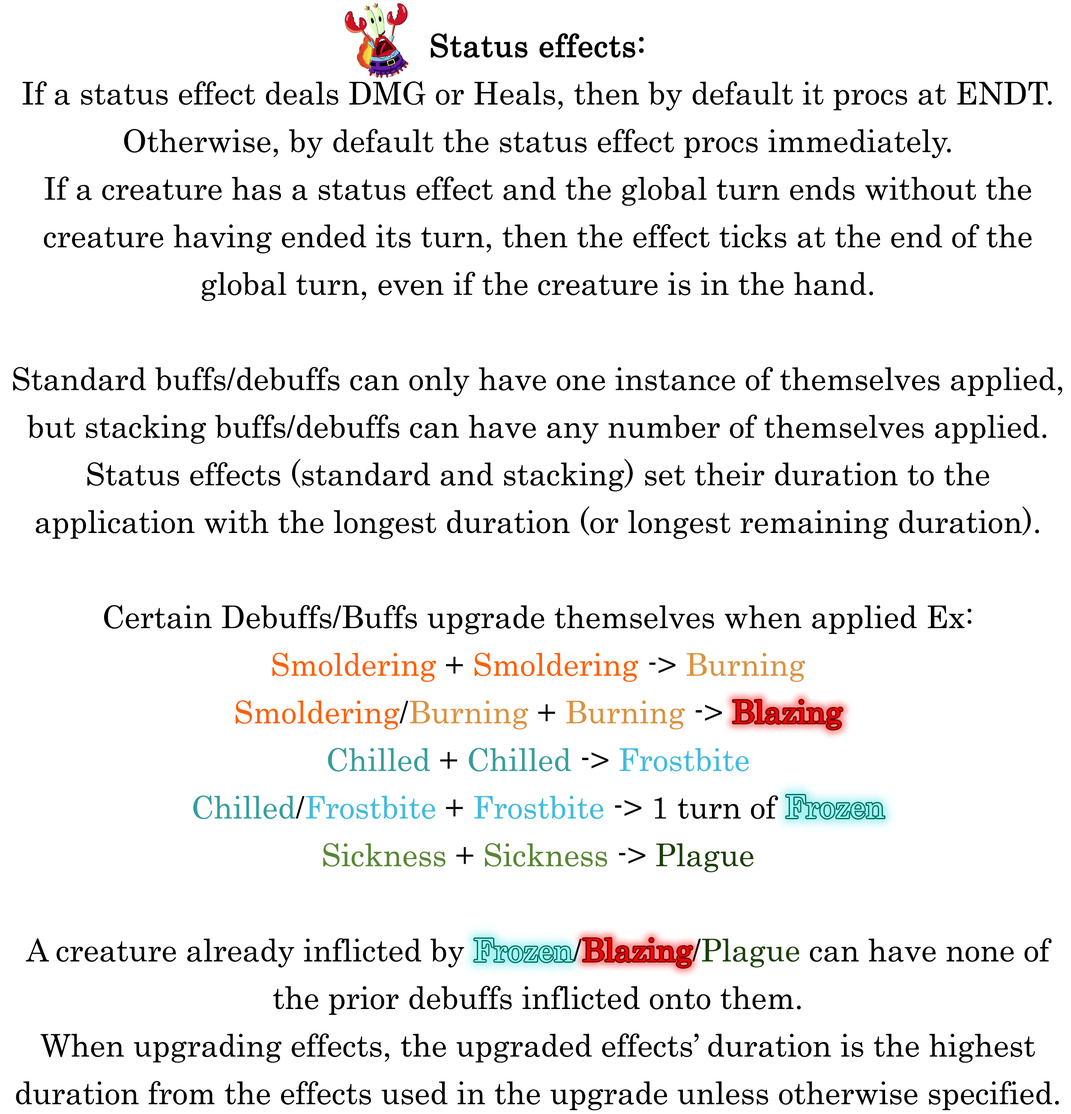
<style>
.page{position:relative;width:1071px;height:1114px;background:#ffffff}
.page>*{position:absolute;margin:0}
.t1{font:53.5px/47.6px "Century";color:#000000}
.t2{font:53.5px/47.6px "Century";color:#000000;font-weight:bold}
.t3{font:53.5px/47.6px "Century";color:#ff6000}
.t4{font:53.5px/47.6px "Century";color:#db923d}
.t5{font:53.5px/47.6px "Century";color:#ff0000}
.t6{font:53.5px/47.6px "Century";color:#359e9d}
.t7{font:53.5px/47.6px "Century";color:#3fbbdf}
.t8{font:53.5px/47.6px "Century";color:#9afff4}
.t9{font:53.5px/47.6px "Century";color:#588732}
.t10{font:53.5px/47.6px "Century";color:#1b3f00}
.t11{font:53.5px "Century";color:#ff0000}
.t12{font:53.5px "Century";color:#9afff4}
</style>
<div class="page">
<p class="t1" style="left:13px;top:33px;width:1049px;height:1077px;text-align:center"><span class="t2">Status effects:<br></span>If a status effect deals DMG or Heals, then by default it procs at ENDT. Otherwise, by default the status effect procs immediately.<br>If a creature has a status effect and the global turn ends without the creature having ended its turn, then the effect ticks at the end of the global turn, even if the creature is in the hand.<br><br>Standard buffs/debuffs can only have one instance of themselves applied, but stacking buffs/debuffs can have any number of themselves applied.<br>Status effects (standard and stacking) set their duration to the application with the longest duration (or longest remaining duration).<br><br>Certain Debuffs/Buffs upgrade themselves when applied Ex:<br><span class="t3">Smoldering</span> + <span class="t3">Smoldering</span> -&gt; <span class="t4">Burning<br></span><span class="t3">Smoldering</span>/<span class="t4">Burning</span> + <span class="t4">Burning</span> -&gt; <span class="t5">Blazing<br></span><span class="t6">Chilled </span>+<span class="t6"> Chilled</span> -&gt; <span class="t7">Frostbite<br></span><span class="t6">Chilled</span>/<span class="t7">Frostbite </span>+<span class="t7"> Frostbite</span> -&gt; 1 turn of <span class="t8">Frozen<br></span><span class="t9">Sickness</span> + <span class="t9">Sickness</span> -&gt; <span class="t10">Plague<br></span><br>A creature already inflicted by <span class="t8">Frozen</span>/<span class="t5">Blazing</span>/<span class="t10">Plague</span> can have none of the prior debuffs inflicted onto them.<br>When upgrading effects, the upgraded effects’ duration is the highest duration from the effects used in the upgrade unless otherwise specified.</p>
<p class="t11" style="left:733px;top:700px;width:109px;height:29px">Blazing</p>
<p class="t12" style="left:786px;top:795px;width:98px;height:23px">Frozen</p>
<p class="t12" style="left:474px;top:938px;width:98px;height:24px">Frozen</p>
<p class="t11" style="left:583px;top:938px;width:109px;height:29px">Blazing</p>
</div>
